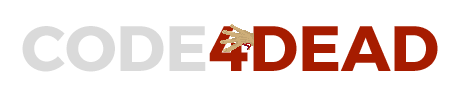
<style>
.page{position:relative;width:467px;height:96px;background:#ffffff}
.page>*{position:absolute;margin:0}
.t1{font:64px "Montserrat-Bold";color:#a61c00}
.t2{font:64px "Montserrat-Bold";color:#dadada}
</style>
<div class="page">
<p class="t1" style="left:22px;top:26px;width:416px;height:46px"><span class="t2">CODE</span>4DEAD</p>
</div>
